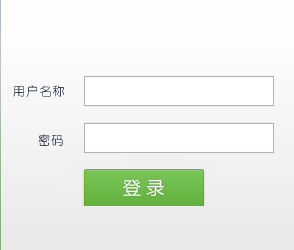
<style>
.page{position:relative;width:294px;height:250px}
.page>*{position:absolute;margin:0}
.t1{font:12px "YouYuan";letter-spacing:0.1em}
</style>
<div class="page">
<p class="t1" style="left:13px;top:85px;width:51px;height:12px">用户名称</p>
<p class="t1" style="left:38px;top:134px;width:25px;height:12px">密码</p>
</div>
